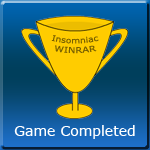
<style>
.page{position:relative;width:150px;height:150px}
.page>*{position:absolute;margin:0}
.t1{font:8px "Verdana";color:#786000}
.t2{font:14px "Verdana";color:#ffffff}
</style>
<div class="page">
<p class="t1" style="left:51px;top:35px;width:48px;height:19px;text-align:center">Insomniac<br>WINRAR</p>
<p class="t2" style="left:14px;top:125px;width:121px;height:14px">Game Completed</p>
</div>
